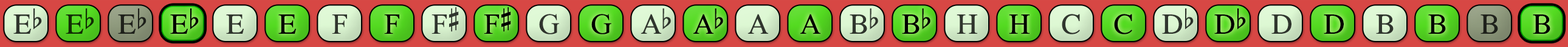
<style>
.page{position:relative;width:1568px;height:47px}
.page>*{position:absolute;margin:0}
.t1{font:29.2px "OpusChords";color:#30352d}
.t2{font:29.2px "OpusChords";color:#122f05}
.t3{font:29.2px "OpusChords";color:#1f211b}
.t4{font:29.2px "OpusChords";color:#000000}
.t5{font:29.2px "OpusChords";color:#30362e}
.t6{font:29.2px "OpusChords";color:#2f352d}
.t7{font:29.2px "OpusChords";letter-spacing:-0.05em;color:#2f352d}
.t8{font:29.2px "OpusChords";letter-spacing:-0.05em;color:#000000}
</style>
<div class="page">
<p class="t1" style="left:13px;top:9px;width:29px;height:25px">Eb</p>
<p class="t2" style="left:66px;top:9px;width:28px;height:25px">Eb</p>
<p class="t3" style="left:118px;top:9px;width:28px;height:25px">Eb</p>
<p class="t4" style="left:170px;top:9px;width:29px;height:25px">Eb</p>
<p class="t5" style="left:226px;top:15px;width:18px;height:19px">E</p>
<p class="t4" style="left:278px;top:15px;width:18px;height:19px">E</p>
<p class="t5" style="left:332px;top:15px;width:15px;height:19px">F</p>
<p class="t4" style="left:384px;top:15px;width:15px;height:19px">F</p>
<p class="t1" style="left:432px;top:7px;width:27px;height:27px">F#</p>
<p class="t4" style="left:484px;top:7px;width:27px;height:27px">F#</p>
<p class="t6" style="left:539px;top:14px;width:20px;height:21px">G</p>
<p class="t4" style="left:591px;top:14px;width:20px;height:21px">G</p>
<p class="t7" style="left:641px;top:9px;width:30px;height:25px">Ab</p>
<p class="t8" style="left:693px;top:9px;width:30px;height:25px">Ab</p>
<p class="t6" style="left:748px;top:14px;width:20px;height:20px">A</p>
<p class="t4" style="left:800px;top:14px;width:20px;height:20px">A</p>
<p class="t1" style="left:850px;top:9px;width:28px;height:25px">Bb</p>
<p class="t4" style="left:902px;top:9px;width:28px;height:25px">Bb</p>
<p class="t1" style="left:957px;top:15px;width:20px;height:19px">H</p>
<p class="t4" style="left:1009px;top:15px;width:21px;height:19px">H</p>
<p class="t5" style="left:1062px;top:14px;width:18px;height:21px">C</p>
<p class="t4" style="left:1114px;top:14px;width:18px;height:21px">C</p>
<p class="t6" style="left:1162px;top:9px;width:32px;height:25px">Db</p>
<p class="t4" style="left:1214px;top:9px;width:32px;height:25px">Db</p>
<p class="t6" style="left:1271px;top:15px;width:20px;height:19px">D</p>
<p class="t4" style="left:1324px;top:15px;width:20px;height:19px">D</p>
<p class="t1" style="left:1376px;top:15px;width:18px;height:19px">B</p>
<p class="t4" style="left:1428px;top:15px;width:18px;height:19px">B</p>
<p class="t3" style="left:1480px;top:15px;width:18px;height:19px">B</p>
<p class="t4" style="left:1533px;top:15px;width:17px;height:19px">B</p>
</div>
